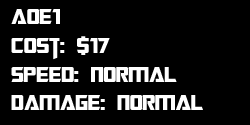
<style>
.page{position:relative;width:250px;height:125px;background:#000000}
.page>*{position:absolute;margin:0}
.t1{font:24px "TransformersMovie";color:#ffffff}
</style>
<div class="page">
<p class="t1" style="left:11px;top:9px;width:192px;height:101px">Aoe1<br>Cost: $17<br>Speed: Normal<br>Damage: Normal</p>
</div>
